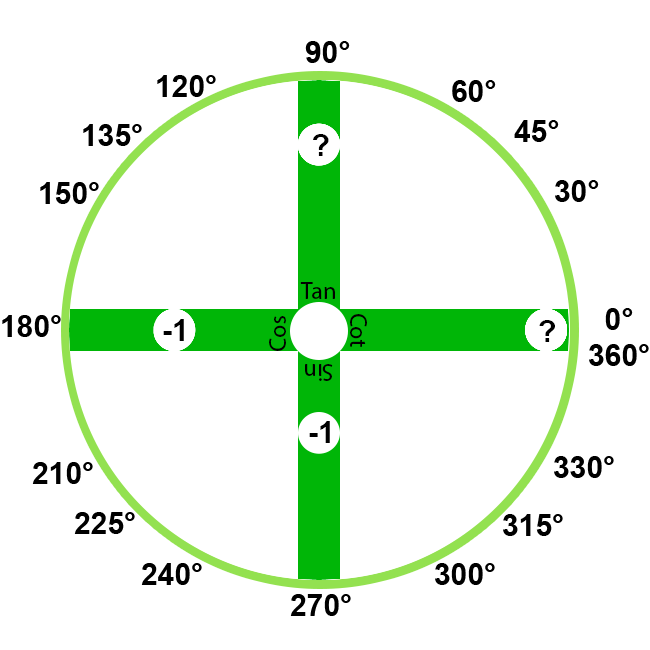
<style>
.page{position:relative;width:650px;height:650px;background:#ffffff}
.page>*{position:absolute;margin:0}
.t1{font:30px "Arial-BoldMT";color:#000000}
.t2{font:24px "MyriadPro-Regular";color:#000000}
</style>
<div class="page">
<p class="t1" style="left:305px;top:41px;width:45px;height:22px">90°</p>
<p class="t1" style="left:157px;top:75px;width:59px;height:22px">120°</p>
<p class="t1" style="left:452px;top:80px;width:44px;height:22px">60°</p>
<p class="t1" style="left:83px;top:124px;width:59px;height:22px">135°</p>
<p class="t1" style="left:514px;top:120px;width:45px;height:22px">45°</p>
<p class="t1" style="left:313px;top:134px;width:16px;height:22px">?</p>
<p class="t1" style="left:40px;top:182px;width:59px;height:22px">150°</p>
<p class="t1" style="left:555px;top:180px;width:44px;height:22px">30°</p>
<p class="t2" style="left:300px;top:282px;width:35px;height:17px">Tan</p>
<p class="t1" style="left:2px;top:315px;width:59px;height:22px">180°</p>
<p class="t2" style="left:269px;top:316px;width:17px;height:35px;rotate:-90deg">Cos</p>
<p class="t2" style="left:350px;top:314px;width:17px;height:33px;rotate:90deg">Cot</p>
<p class="t1" style="left:589px;top:308px;width:60px;height:58px">0°<br>360°</p>
<p class="t1" style="left:163px;top:319px;width:21px;height:22px">-1</p>
<p class="t1" style="left:539px;top:320px;width:16px;height:22px">?</p>
<p class="t2" style="left:305px;top:364px;width:28px;height:17px;rotate:180deg">Sin</p>
<p class="t1" style="left:309px;top:421px;width:21px;height:22px">-1</p>
<p class="t1" style="left:32px;top:462px;width:61px;height:22px">210°</p>
<p class="t1" style="left:554px;top:456px;width:60px;height:22px">330°</p>
<p class="t1" style="left:74px;top:512px;width:61px;height:22px">225°</p>
<p class="t1" style="left:503px;top:514px;width:60px;height:22px">315°</p>
<p class="t1" style="left:141px;top:563px;width:61px;height:22px">240°</p>
<p class="t1" style="left:435px;top:563px;width:60px;height:22px">300°</p>
<p class="t1" style="left:290px;top:594px;width:61px;height:22px">270°</p>
</div>
